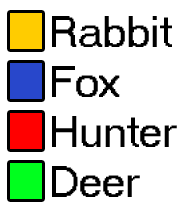
<style>
.page{position:relative;width:196px;height:208px;background:#ffffff}
.page>*{position:absolute;margin:0}
.t1{font:43px "MS Sans Serif";color:#000000}
</style>
<div class="page">
<p class="t1" style="left:52px;top:16px;width:120px;height:31px">Rabbit</p>
<p class="t1" style="left:52px;top:66px;width:68px;height:31px">Fox</p>
<p class="t1" style="left:52px;top:116px;width:125px;height:31px">Hunter</p>
<p class="t1" style="left:52px;top:166px;width:88px;height:31px">Deer</p>
</div>
